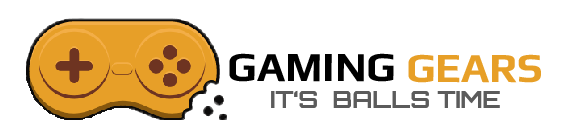
<style>
.page{position:relative;width:564px;height:135px;background:#ffffff}
.page>*{position:absolute;margin:0}
.t1{font:41.3px "Play-Bold";color:#000000}
.t2{font:41.3px "Play-Bold";color:#e79f27}
.t3{font:24px "Orbitron-Bold";color:#5b5b5b}
</style>
<div class="page">
<p class="t1" style="left:229px;top:53px;width:312px;height:30px">GAMING<span class="t2"> GEARS</span></p>
<p class="t3" style="left:271px;top:90px;width:229px;height:18px">IT‘S  BALLS TIME</p>
</div>
